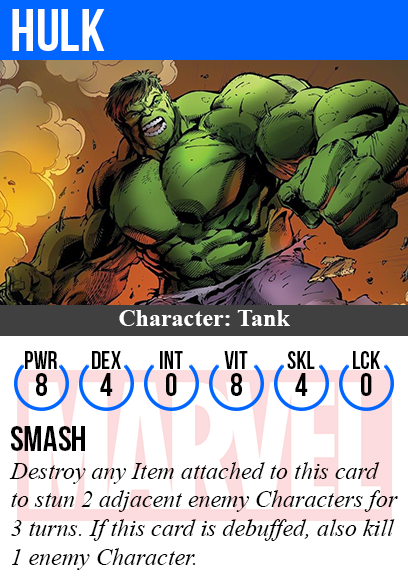
<style>
.page{position:relative;width:408px;height:585px;background:#ffffff}
.page>*{position:absolute;margin:0}
.t1{font:60px "BebasNeue";color:#ffffff}
.t2{font:24px "TimesNewRomanPS-BoldMT";color:#ffffff}
.t3{font:25px "BebasNeue";color:#000000}
.t4{font:32px "BebasNeue";color:#000000}
.t5{font:36px "BebasNeue";color:#000000}
.t6{font:24px "TimesNewRomanPS-ItalicMT";color:#000000}
</style>
<div class="page">
<p class="t1" style="left:12px;top:9px;width:93px;height:42px">hulk</p>
<p class="t2" style="left:119px;top:310px;width:171px;height:16px">Character: Tank</p>
<p class="t3" style="left:25px;top:351px;width:32px;height:18px">PWR</p>
<p class="t3" style="left:92px;top:351px;width:29px;height:18px">dex</p>
<p class="t3" style="left:160px;top:351px;width:23px;height:18px">int</p>
<p class="t3" style="left:224px;top:351px;width:24px;height:18px">vit</p>
<p class="t3" style="left:287px;top:351px;width:28px;height:18px">skl</p>
<p class="t3" style="left:353px;top:351px;width:27px;height:18px">lck</p>
<p class="t4" style="left:36px;top:373px;width:11px;height:23px">8</p>
<p class="t4" style="left:100px;top:373px;width:13px;height:23px">4</p>
<p class="t4" style="left:166px;top:373px;width:11px;height:23px">0</p>
<p class="t4" style="left:231px;top:373px;width:11px;height:23px">8</p>
<p class="t4" style="left:295px;top:373px;width:13px;height:23px">4</p>
<p class="t4" style="left:361px;top:373px;width:11px;height:23px">0</p>
<p class="t5" style="left:11px;top:426px;width:74px;height:25px">smash</p>
<p class="t6" style="left:9px;top:462px;width:389px;height:108px">Destroy any Item attached to this card<br>to stun 2 adjacent enemy Characters for<br>3 turns. If this card is debuffed, also kill<br>1 enemy Character.</p>
</div>
